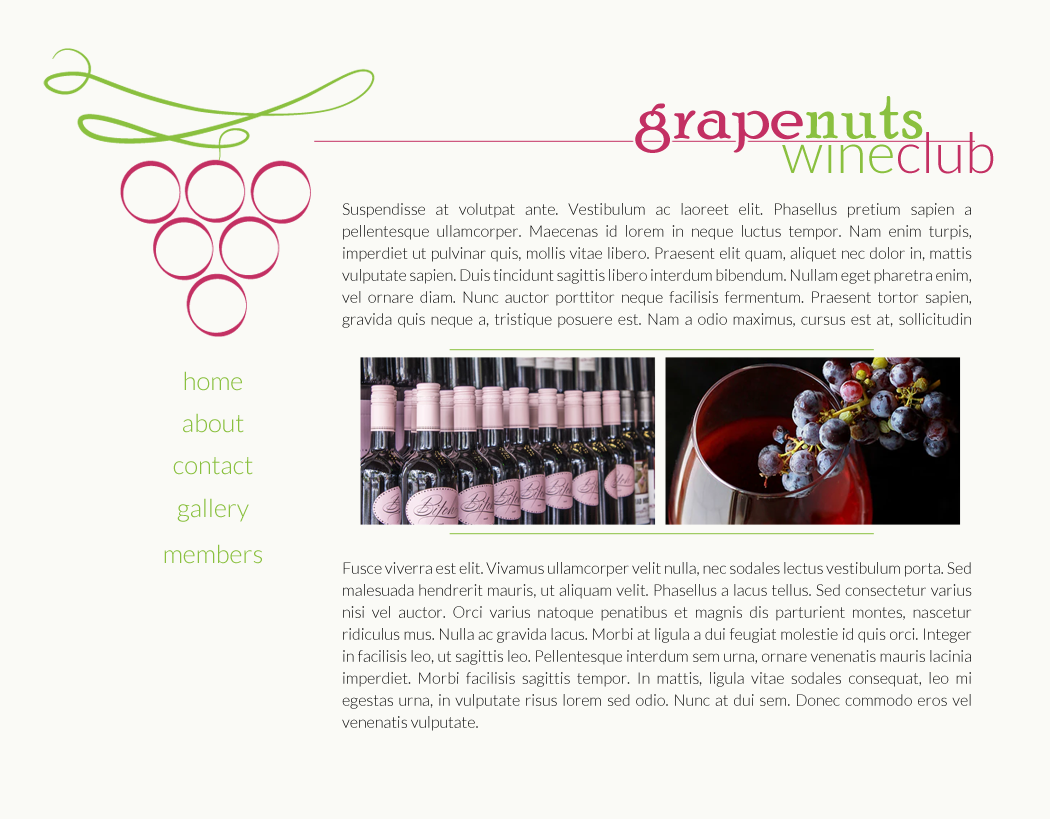
<style>
.page{position:relative;width:1050px;height:819px;background:#fafaf6}
.page>*{position:absolute;margin:0}
.t1{font:77.2px "PoorRichard-Regular";color:#c33063}
.t2{font:77.2px "PoorRichard-Regular";color:#8ac03f}
.t3{font:16px/22px "Lato-Light";color:#0b0b0b}
.t4{font:25.2px "Lato-Light";color:#8ac03f}
</style>
<div class="page">
<p class="t1" style="left:635px;top:96px;width:288px;height:57px">grape<span class="t2">nuts</span></p>
<p class="t3" style="left:342px;top:203px;width:630px;height:125px;text-align:justify">Suspendisse at volutpat ante. Vestibulum ac laoreet elit. Phasellus pretium sapien a pellentesque ullamcorper. Maecenas id lorem in neque luctus tempor. Nam enim turpis, imperdiet ut pulvinar quis, mollis vitae libero. Praesent elit quam, aliquet nec dolor in, mattis vulputate sapien. Duis tincidunt sagittis libero interdum bibendum. Nullam eget pharetra enim, vel ornare diam. Nunc auctor porttitor neque facilisis fermentum. Praesent tortor sapien, gravida quis neque a, tristique posuere est. Nam a odio maximus, cursus est at, sollicitudin purus.</p>
<p class="t4" style="left:184px;top:371px;width:58px;height:20px">home</p>
<p class="t4" style="left:183px;top:413px;width:61px;height:20px">about</p>
<p class="t4" style="left:173px;top:457px;width:80px;height:18px">contact</p>
<p class="t4" style="left:177px;top:498px;width:72px;height:24px">gallery</p>
<p class="t4" style="left:164px;top:544px;width:98px;height:20px">members</p>
<p class="t3" style="left:342px;top:562px;width:630px;height:169px;text-align:justify">Fusce viverra est elit. Vivamus ullamcorper velit nulla, nec sodales lectus vestibulum porta. Sed malesuada hendrerit mauris, ut aliquam velit. Phasellus a lacus tellus. Sed consectetur varius nisi vel auctor. Orci varius natoque penatibus et magnis dis parturient montes, nascetur ridiculus mus. Nulla ac gravida lacus. Morbi at ligula a dui feugiat molestie id quis orci. Integer in facilisis leo, ut sagittis leo. Pellentesque interdum sem urna, ornare venenatis mauris lacinia imperdiet. Morbi facilisis sagittis tempor. In mattis, ligula vitae sodales consequat, leo mi egestas urna, in vulputate risus lorem sed odio. Nunc at dui sem. Donec commodo eros vel venenatis vulputate.</p>
</div>
